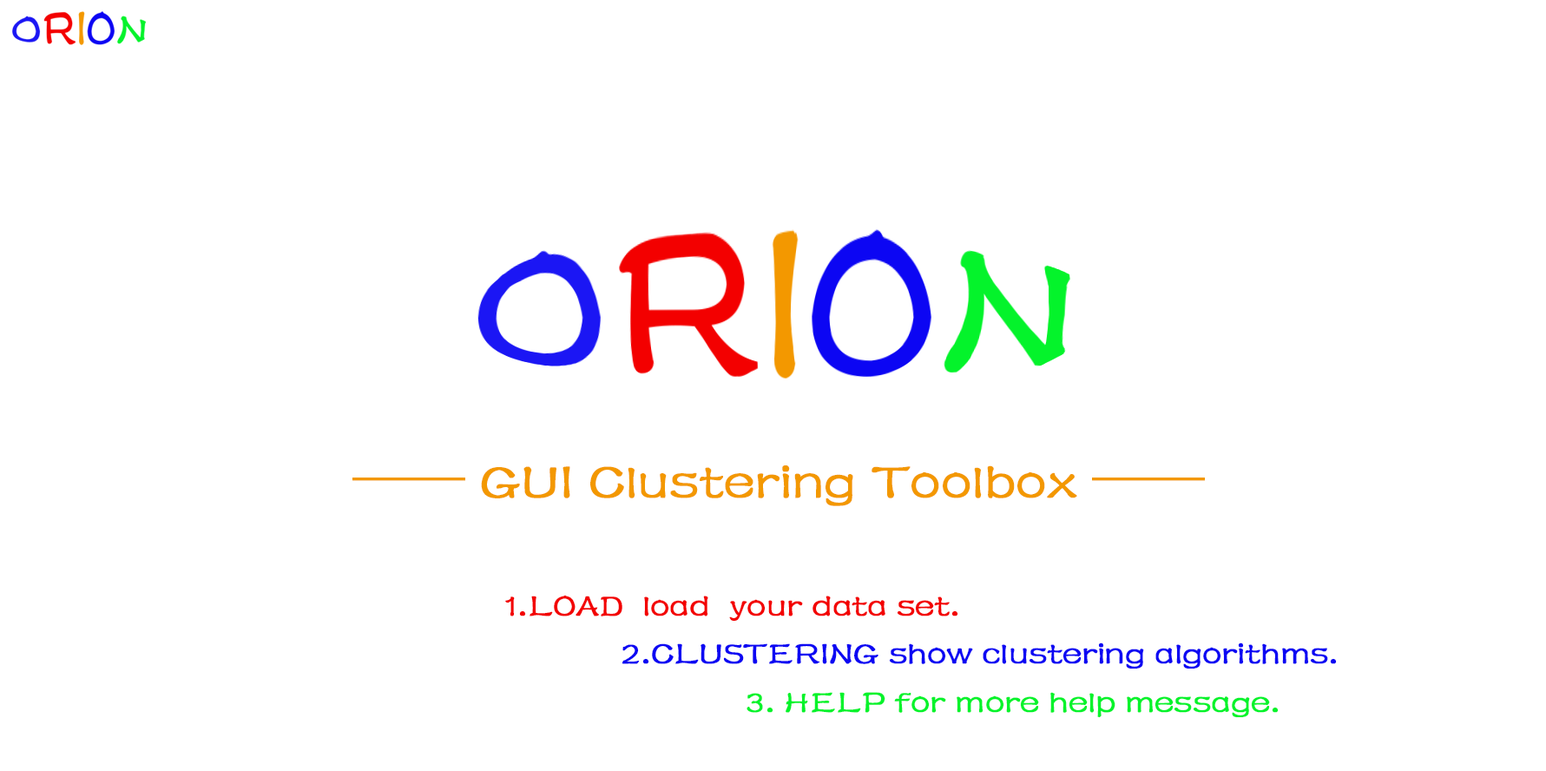
<style>
.page{position:relative;width:1546px;height:771px;background:#ffffff}
.page>*{position:absolute;margin:0}
.t1{font:55px "FZSTK--GBK1-0";color:#f39800;font-weight:bold}
.t2{font:34.4px "FZSTK--GBK1-0";color:#f30000;font-weight:bold}
.t3{font:34.4px "FZSTK--GBK1-0";color:#0c06f3;font-weight:bold}
.t4{font:34.4px "FZSTK--GBK1-0";color:#04f32b;font-weight:bold}
</style>
<div class="page">
<p class="t1" style="left:353px;top:465px;width:852px;height:41px">—— GUI Clustering Toolbox ——</p>
<p class="t2" style="left:505px;top:595px;width:454px;height:26px">1.LOAD  load  your data set.</p>
<p class="t3" style="left:622px;top:643px;width:715px;height:26px">2.CLUSTERING show clustering algorithms.</p>
<p class="t4" style="left:747px;top:692px;width:532px;height:26px">3. HELP for more help message.</p>
</div>
